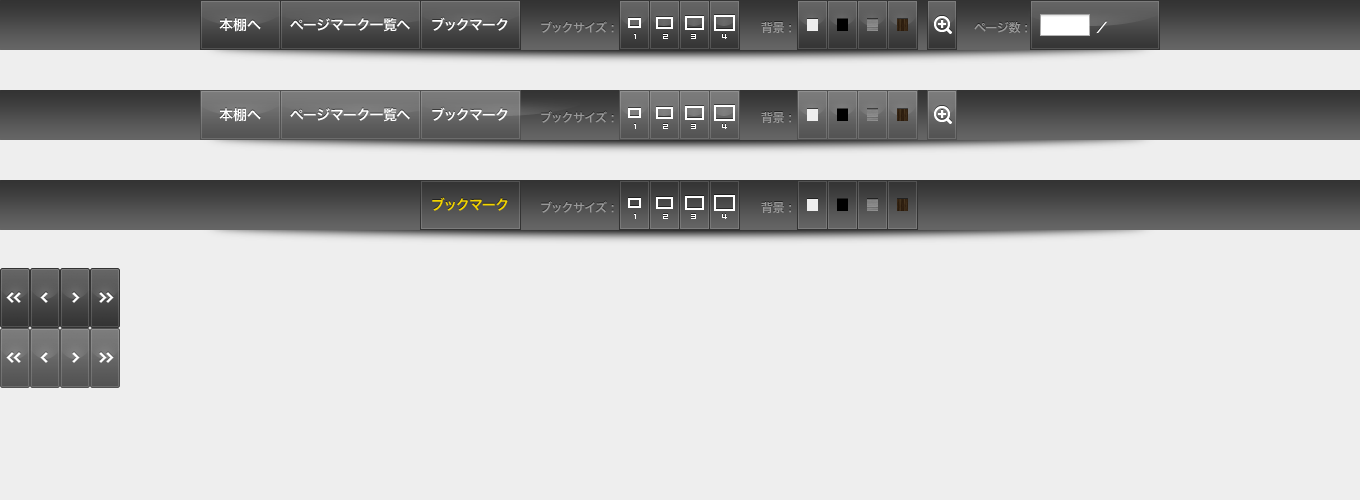
<style>
.page{position:relative;width:1360px;height:500px;background:#eeeeee}
.page>*{position:absolute;margin:0}
.t1{font:14px "HiraKakuPro-W6";color:#ffffff}
.t2{font:12px "HiraKakuPro-W6";color:#999999}
.t3{font:5px "Gogo-FiveVer2";color:#ffffff}
.t4{font:14px "HiraKakuPro-W6";color:#f3d400}
</style>
<div class="page">
<p class="t1" style="left:432px;top:17px;width:76px;height:14px">ブックマーク</p>
<p class="t1" style="left:219px;top:18px;width:42px;height:14px">本棚へ</p>
<p class="t1" style="left:290px;top:18px;width:120px;height:14px">ページマーク一覧へ</p>
<p class="t2" style="left:541px;top:21px;width:73px;height:12px">ブックサイズ :</p>
<p class="t2" style="left:761px;top:22px;width:30px;height:11px">背景 :</p>
<p class="t3" style="left:634px;top:34px;width:2px;height:5px">1</p>
<p class="t3" style="left:663px;top:34px;width:5px;height:5px">2</p>
<p class="t3" style="left:691px;top:34px;width:5px;height:5px">3</p>
<p class="t1" style="left:219px;top:108px;width:42px;height:14px">本棚へ</p>
<p class="t1" style="left:290px;top:108px;width:120px;height:14px">ページマーク一覧へ</p>
<p class="t1" style="left:432px;top:107px;width:76px;height:14px">ブックマーク</p>
<p class="t2" style="left:541px;top:111px;width:73px;height:12px">ブックサイズ :</p>
<p class="t2" style="left:761px;top:112px;width:30px;height:11px">背景 :</p>
<p class="t3" style="left:634px;top:124px;width:2px;height:5px">1</p>
<p class="t3" style="left:663px;top:124px;width:5px;height:5px">2</p>
<p class="t3" style="left:691px;top:124px;width:5px;height:5px">3</p>
<p class="t3" style="left:722px;top:124px;width:5px;height:5px">4</p>
<p class="t4" style="left:432px;top:197px;width:76px;height:14px">ブックマーク</p>
<p class="t2" style="left:541px;top:201px;width:73px;height:12px">ブックサイズ :</p>
<p class="t2" style="left:761px;top:202px;width:30px;height:11px">背景 :</p>
<p class="t3" style="left:634px;top:214px;width:2px;height:5px">1</p>
<p class="t3" style="left:663px;top:214px;width:5px;height:5px">2</p>
<p class="t3" style="left:691px;top:214px;width:5px;height:5px">3</p>
<p class="t3" style="left:722px;top:214px;width:5px;height:5px">4</p>
</div>
